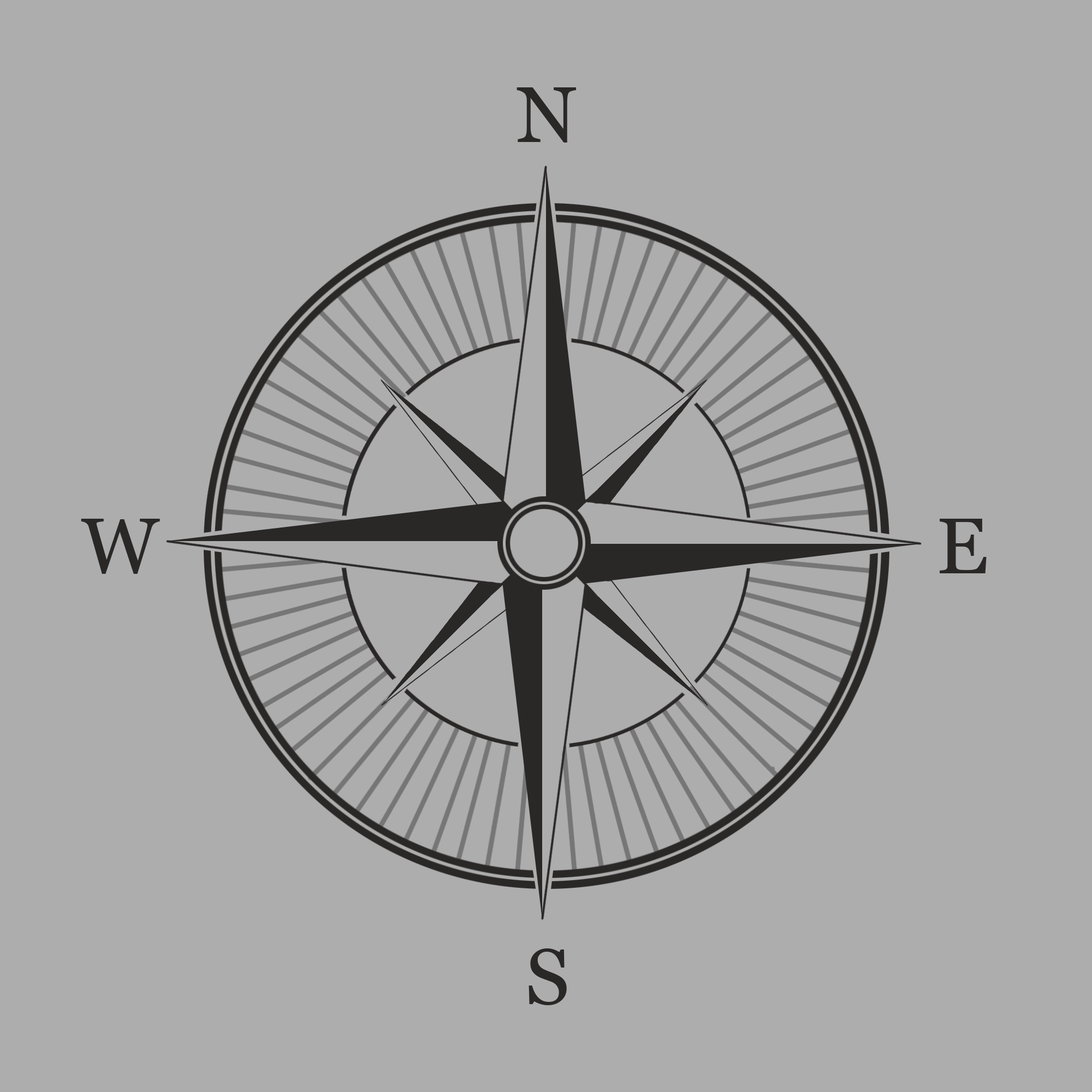
<style>
.page{position:relative;width:1092px;height:1092px;background:#adadad}
.page>*{position:absolute;margin:0}
.t1{font:79.4px "Georgia";color:#131111}
</style>
<div class="page">
<p class="t1" style="left:517px;top:87px;width:60px;height:56px">N</p>
<p class="t1" style="left:81px;top:519px;width:79px;height:55px">W</p>
<p class="t1" style="left:940px;top:519px;width:47px;height:54px">E</p>
<p class="t1" style="left:529px;top:948px;width:38px;height:57px">S</p>
</div>
